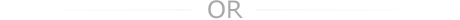
<style>
.page{position:relative;width:460px;height:20px;background:#ffffff}
.page>*{position:absolute;margin:0}
.t1{font:24px "Verdana";color:#aaaaaa}
</style>
<div class="page">
<p class="t1" style="left:208px;top:0px;width:35px;height:19px">OR</p>
</div>
